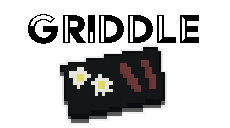
<style>
.page{position:relative;width:230px;height:128px;background:#ffffff}
.page>*{position:absolute;margin:0}
.t1{font:46.7px "AcierBATText-Noir";color:#000000}
</style>
<div class="page">
<p class="t1" style="left:28px;top:14px;width:171px;height:30px">Griddle</p>
</div>
